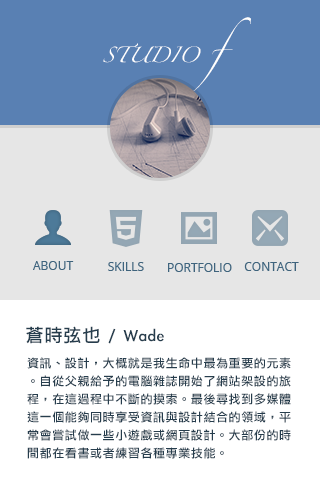
<style>
.page{position:relative;width:320px;height:480px;background:#ffffff}
.page>*{position:absolute;margin:0}
.t1{font:14px "Zapfino";color:#ffffff}
.t2{font:24px "Zapfino";color:#ffffff}
.t3{font:12px "OpenSans";color:#3f647d}
.t4{font:12px "OpenSans";color:#3f637c}
.t5{font:18px "LiGothicMed";letter-spacing:0.05em;color:#263d4d}
.t6{font:12px/18px "LiGothicMed";letter-spacing:0.05em;color:#263d4d}
</style>
<div class="page">
<p class="t1" style="left:103px;top:17px;width:148px;height:82px">STUDIO<span class="t2"> f</span></p>
<p class="t3" style="left:33px;top:261px;width:41px;height:9px">ABOUT</p>
<p class="t4" style="left:108px;top:262px;width:36px;height:9px">SKILLS</p>
<p class="t3" style="left:168px;top:263px;width:64px;height:9px">PORTFOLIO</p>
<p class="t4" style="left:244px;top:262px;width:55px;height:9px">CONTACT</p>
<p class="t5" style="left:26px;top:326px;width:138px;height:18px">蒼時弦也 / Wade</p>
<p class="t6" style="left:27px;top:357px;width:264px;height:102px">資訊、設計，大概就是我生命中最為重要的元素。自從父親給予的電腦雜誌開始了網站架設的旅程，在這過程中不斷的摸索。最後尋找到多媒體這一個能夠同時享受資訊與設計結合的領域，平常會嘗試做一些小遊戲或網頁設計。大部份的時間都在看書或者練習各種專業技能。</p>
</div>
